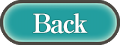
<style>
.page{position:relative;width:120px;height:45px}
.page>*{position:absolute;margin:0}
.t1{font:26px "RyuminPro-ExBold";letter-spacing:-0.08em;color:#ffffff}
</style>
<div class="page">
<p class="t1" style="left:33px;top:13px;width:55px;height:21px">Back</p>
</div>
